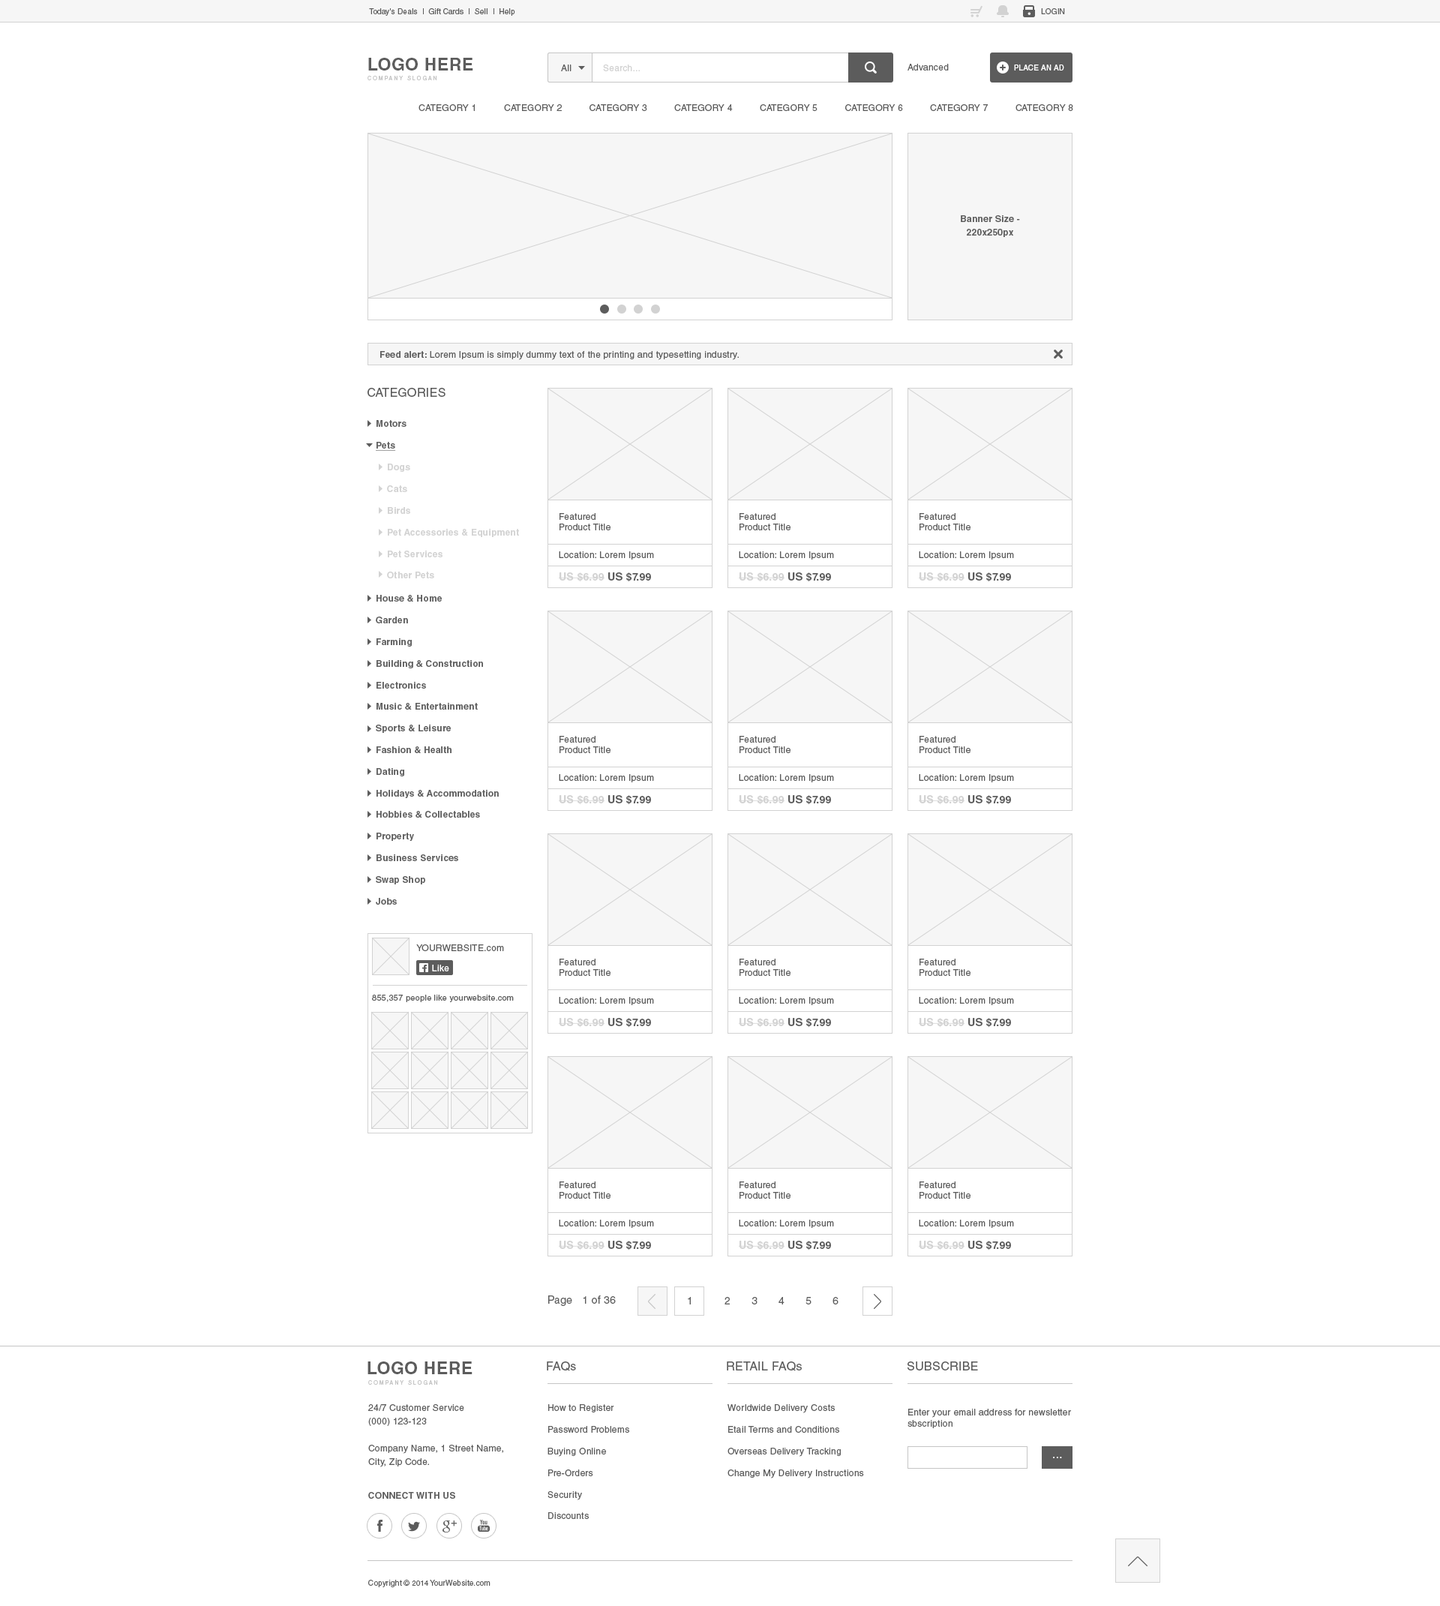
<style>
.page{position:relative;width:1440px;height:1606px;background:#ffffff}
.page>*{position:absolute;margin:0}
.t1{font:7.5px "HelveticaLTStd-Roman";letter-spacing:0.024em;color:#5c5c5c}
.t2{font:7.5px "HelveticaLTStd-Roman";letter-spacing:0.024em;color:#5c5c5c;text-transform:uppercase}
.t3{font:17.2px "HelveticaLTStd-Bold";letter-spacing:0.024em;color:#5c5c5c;text-transform:uppercase}
.t4{font:9px "HelveticaLTStd-Roman";letter-spacing:0.024em;color:#5c5c5c}
.t5{font:9px "HelveticaLTStd-Roman";letter-spacing:0.024em;color:#d2d2d2}
.t6{font:7.5px "HelveticaLTStd-Roman";letter-spacing:0.024em;color:#ffffff;text-transform:uppercase}
.t7{font:5.2px "HelveticaLTStd-Roman";letter-spacing:0.3em;color:#c5c5c5;text-transform:uppercase}
.t8{font:9px "HelveticaLTStd-Roman";letter-spacing:0.024em;color:#5c5c5c;text-transform:uppercase}
.t9{font:9px/13.5px "HelveticaLTStd-Bold";letter-spacing:0.024em;color:#5c5c5c}
.t10{font:9px "HelveticaLTStd-Bold";letter-spacing:0.024em;color:#5c5c5c}
.t11{font:12px "HelveticaLTStd-Roman";letter-spacing:0.024em;color:#5c5c5c;text-transform:uppercase}
.t12{font:9px "HelveticaLTStd-Bold";letter-spacing:0.024em;color:#5c5c5c;text-decoration:underline}
.t13{font:9px "HelveticaLTStd-Bold";letter-spacing:0.024em;color:#d2d2d2}
.t14{font:10.5px "HelveticaLTStd-Bold";letter-spacing:0.024em;color:#d2d2d2}
.t15{font:10.5px "HelveticaLTStd-Bold";letter-spacing:0.024em;color:#5c5c5c}
.t16{font:9px "HelveticaLTStd-Roman";letter-spacing:0.024em;color:#ffffff}
.t17{font:8.2px "HelveticaLTStd-Roman";letter-spacing:0.024em;color:#5c5c5c}
.t18{font:10.5px "HelveticaLTStd-Roman";letter-spacing:0.024em;color:#5c5c5c}
.t19{font:12px "HelveticaLTStd-Roman";letter-spacing:0.024em;color:#5c5c5c}
.t20{font:9px/13.5px "HelveticaLTStd-Roman";letter-spacing:0.024em;color:#5c5c5c}
.t21{font:12px "OpenSans";letter-spacing:0.024em;color:#ffffff;text-transform:uppercase}
.t22{font:9px "HelveticaLTStd-Bold";letter-spacing:0.024em;color:#5c5c5c;text-transform:uppercase}
</style>
<div class="page">
<p class="t1" style="left:369px;top:8px;width:146px;height:8px">Today's Deals  |  Gift Cards  |  Sell  |  Help</p>
<p class="t2" style="left:1041px;top:8px;width:24px;height:6px">login</p>
<p class="t3" style="left:368px;top:58px;width:105px;height:12px">Logo Here</p>
<p class="t4" style="left:561px;top:64px;width:11px;height:7px">All</p>
<p class="t5" style="left:603px;top:64px;width:37px;height:7px">Search...</p>
<p class="t4" style="left:908px;top:64px;width:41px;height:6px">Advanced</p>
<p class="t6" style="left:1014px;top:64px;width:50px;height:6px">Place an ad</p>
<p class="t7" style="left:368px;top:76px;width:69px;height:4px">Company Slogan</p>
<p class="t8" style="left:418px;top:104px;width:655px;height:7px">Category 1          Category 2          Category 3          Category 4          Category 5          Category 6          Category 7          Category 8</p>
<p class="t9" style="left:961px;top:215px;width:59px;height:22px;text-align:center">Banner Size -<br>220x250px</p>
<p class="t4" style="left:380px;top:351px;width:359px;height:9px"><span class="t10">Feed alert: </span>Lorem Ipsum is simply dummy text of the printing and typesetting industry.</p>
<p class="t11" style="left:368px;top:388px;width:78px;height:9px">Categories</p>
<p class="t10" style="left:376px;top:420px;width:30px;height:31px">Motors<br><br><span class="t12">Pets</span></p>
<p class="t13" style="left:387px;top:464px;width:132px;height:114px">Dogs<br><br>Cats<br><br>Birds<br><br>Pet Accessories &amp; Equipment<br><br>Pet Services <br><br>Other Pets</p>
<p class="t4" style="left:560px;top:513px;width:50px;height:17px">Featured<br>Product Title</p>
<p class="t4" style="left:740px;top:513px;width:50px;height:17px">Featured<br>Product Title</p>
<p class="t4" style="left:920px;top:513px;width:50px;height:17px">Featured<br>Product Title</p>
<p class="t4" style="left:559px;top:551px;width:95px;height:9px">Location: Lorem Ipsum</p>
<p class="t4" style="left:739px;top:551px;width:95px;height:9px">Location: Lorem Ipsum</p>
<p class="t4" style="left:919px;top:551px;width:95px;height:9px">Location: Lorem Ipsum</p>
<p class="t14" style="left:559px;top:572px;width:92px;height:10px">US $6.99 <span class="t15">US $7.99</span></p>
<p class="t14" style="left:739px;top:572px;width:92px;height:10px">US $6.99 <span class="t15">US $7.99</span></p>
<p class="t14" style="left:919px;top:572px;width:92px;height:10px">US $6.99 <span class="t15">US $7.99</span></p>
<p class="t10" style="left:376px;top:595px;width:123px;height:309px">House &amp; Home<br><br>Garden<br><br>Farming<br><br>Building &amp; Construction<br><br>Electronics<br><br>Music &amp; Entertainment<br><br>Sports &amp; Leisure<br><br>Fashion &amp; Health<br><br>Dating<br><br>Holidays &amp; Accommodation<br><br>Hobbies &amp; Collectables<br><br>Property<br><br>Business Services<br><br>Swap Shop<br><br>Jobs</p>
<p class="t4" style="left:560px;top:736px;width:50px;height:17px">Featured<br>Product Title</p>
<p class="t4" style="left:740px;top:736px;width:50px;height:17px">Featured<br>Product Title</p>
<p class="t4" style="left:920px;top:736px;width:50px;height:17px">Featured<br>Product Title</p>
<p class="t4" style="left:559px;top:774px;width:95px;height:8px">Location: Lorem Ipsum</p>
<p class="t4" style="left:739px;top:774px;width:95px;height:8px">Location: Lorem Ipsum</p>
<p class="t4" style="left:919px;top:774px;width:95px;height:8px">Location: Lorem Ipsum</p>
<p class="t14" style="left:559px;top:795px;width:92px;height:10px">US $6.99 <span class="t15">US $7.99</span></p>
<p class="t14" style="left:739px;top:795px;width:92px;height:10px">US $6.99 <span class="t15">US $7.99</span></p>
<p class="t14" style="left:919px;top:795px;width:92px;height:10px">US $6.99 <span class="t15">US $7.99</span></p>
<p class="t8" style="left:416px;top:944px;width:88px;height:7px">Yourwebsite.<span class="t4">com</span></p>
<p class="t16" style="left:432px;top:964px;width:17px;height:7px">Like</p>
<p class="t4" style="left:560px;top:958px;width:50px;height:18px">Featured<br>Product Title</p>
<p class="t4" style="left:740px;top:958px;width:50px;height:18px">Featured<br>Product Title</p>
<p class="t4" style="left:920px;top:958px;width:50px;height:18px">Featured<br>Product Title</p>
<p class="t17" style="left:372px;top:994px;width:142px;height:8px">855,357 people like yourwebsite.com</p>
<p class="t4" style="left:559px;top:997px;width:95px;height:8px">Location: Lorem Ipsum</p>
<p class="t4" style="left:739px;top:997px;width:95px;height:8px">Location: Lorem Ipsum</p>
<p class="t4" style="left:919px;top:997px;width:95px;height:8px">Location: Lorem Ipsum</p>
<p class="t14" style="left:559px;top:1018px;width:92px;height:10px">US $6.99 <span class="t15">US $7.99</span></p>
<p class="t14" style="left:739px;top:1018px;width:92px;height:10px">US $6.99 <span class="t15">US $7.99</span></p>
<p class="t14" style="left:919px;top:1018px;width:92px;height:10px">US $6.99 <span class="t15">US $7.99</span></p>
<p class="t4" style="left:560px;top:1181px;width:50px;height:17px">Featured<br>Product Title</p>
<p class="t4" style="left:740px;top:1181px;width:50px;height:17px">Featured<br>Product Title</p>
<p class="t4" style="left:920px;top:1181px;width:50px;height:17px">Featured<br>Product Title</p>
<p class="t4" style="left:559px;top:1220px;width:95px;height:8px">Location: Lorem Ipsum</p>
<p class="t4" style="left:739px;top:1220px;width:95px;height:8px">Location: Lorem Ipsum</p>
<p class="t4" style="left:919px;top:1220px;width:95px;height:8px">Location: Lorem Ipsum</p>
<p class="t14" style="left:559px;top:1240px;width:92px;height:10px">US $6.99 <span class="t15">US $7.99</span></p>
<p class="t14" style="left:739px;top:1240px;width:92px;height:10px">US $6.99 <span class="t15">US $7.99</span></p>
<p class="t14" style="left:919px;top:1240px;width:92px;height:10px">US $6.99 <span class="t15">US $7.99</span></p>
<p class="t18" style="left:548px;top:1295px;width:68px;height:11px">Page   1 of 36</p>
<p class="t18" style="left:688px;top:1297px;width:3px;height:7px">1</p>
<p class="t18" style="left:724px;top:1297px;width:114px;height:7px">2 3 4 5 6</p>
<p class="t3" style="left:368px;top:1361px;width:104px;height:13px">Logo Here</p>
<p class="t11" style="left:547px;top:1361px;width:29px;height:10px">FAQ<span class="t19">s</span></p>
<p class="t11" style="left:727px;top:1361px;width:75px;height:10px">REtail FAQ<span class="t19">s</span></p>
<p class="t11" style="left:908px;top:1361px;width:70px;height:9px">Subscribe</p>
<p class="t7" style="left:368px;top:1380px;width:70px;height:4px">Company Slogan</p>
<p class="t20" style="left:368px;top:1404px;width:135px;height:63px">24/7 Customer Service<br>(000) 123-123<br><br>Company Name, 1 Street Name,<br>City, Zip Code.</p>
<p class="t4" style="left:548px;top:1404px;width:81px;height:115px">How to Register<br><br>Password Problems<br><br>Buying Online<br><br>Pre-Orders<br><br>Security<br><br>Discounts</p>
<p class="t4" style="left:728px;top:1404px;width:136px;height:74px">Worldwide Delivery Costs<br><br>Etail Terms and Conditions<br><br>Overseas Delivery Tracking<br><br>Change My Delivery Instructions</p>
<p class="t4" style="left:908px;top:1408px;width:163px;height:20px">Enter your email address for newsletter sbscription</p>
<p class="t21" style="left:1053px;top:1456px;width:9px;height:2px">...</p>
<p class="t22" style="left:368px;top:1492px;width:87px;height:6px">Connect with Us</p>
<p class="t1" style="left:368px;top:1580px;width:122px;height:7px">Copyright © 2014 YourWebsite.com</p>
</div>
